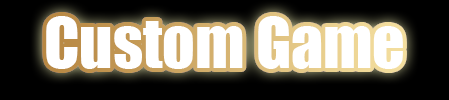
<style>
.page{position:relative;width:449px;height:100px;background:#000000}
.page>*{position:absolute;margin:0}
.t1{font:64.4px "Impact";color:#ffffff}
</style>
<div class="page">
<p class="t1" style="left:46px;top:16px;width:357px;height:53px">Custom Game</p>
<p class="t1" style="left:46px;top:16px;width:357px;height:53px">Custom Game</p>
</div>
